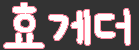
<style>
.page{position:relative;width:139px;height:50px;background:#333333}
.page>*{position:absolute;margin:0}
.t1{font:49.8px "insungitCutelivelyjisu";color:#ffffff}
</style>
<div class="page">
<p class="t1" style="left:4px;top:3px;width:126px;height:45px">효게더</p>
</div>
